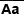
<style>
.page{position:relative;width:24px;height:24px;background:#ffffff}
.page>*{position:absolute;margin:0}
.t1{font:14px "Arial-BoldMT";color:#000000}
</style>
<div class="page">
<p class="t1" style="left:1px;top:3px;width:18px;height:10px">Aa</p>
</div>
